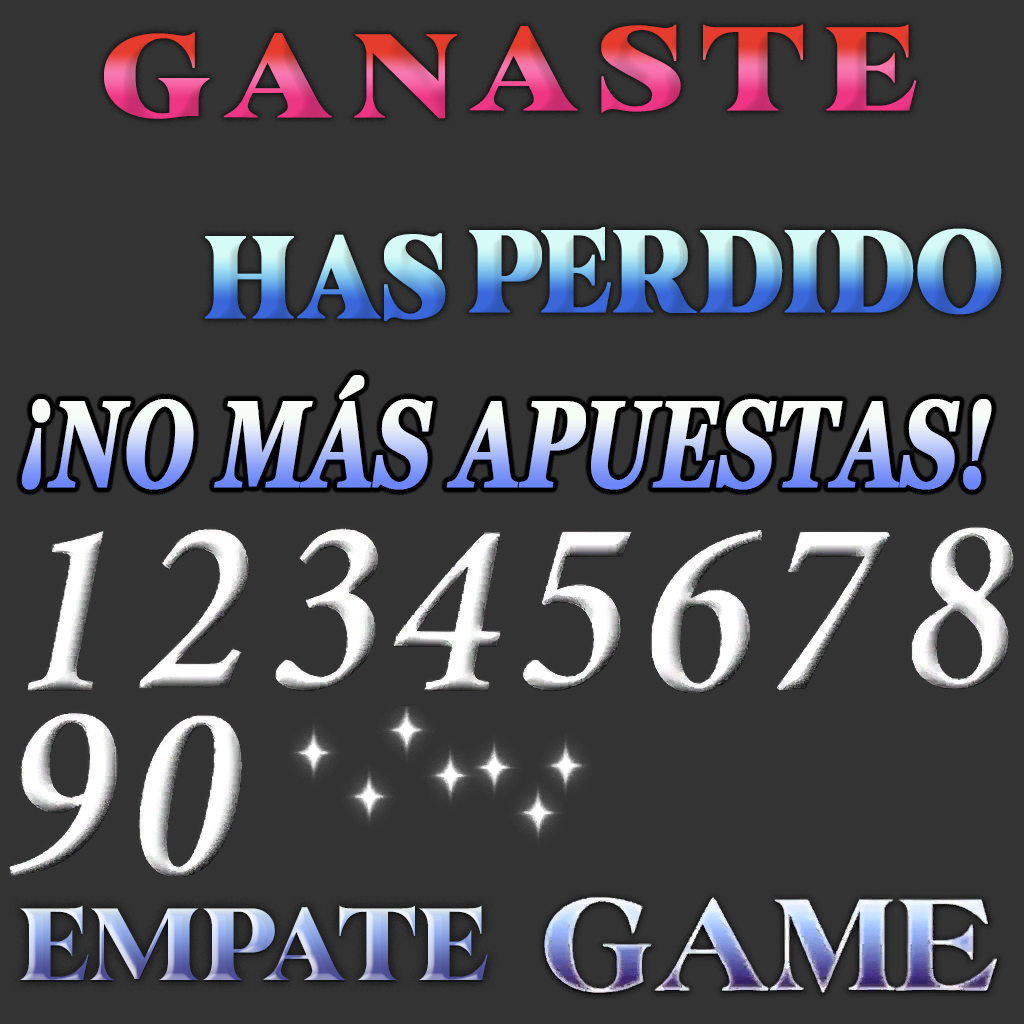
<style>
.page{position:relative;width:1024px;height:1024px;background:#333333}
.page>*{position:absolute;margin:0}
.t1{font:117.3px "KarlieSerif-Regular";letter-spacing:0.12em;font-weight:bold;scale:1.06 1}
.t2{font:115.5px "KarlieSerif-Regular";font-weight:bold;scale:0.81 1}
.t3{font:121.7px "Georgia-BoldItalic";font-weight:bold;scale:0.69 1}
.t4{font:102.1px "KarlieSerif-Regular";scale:0.93 1}
</style>
<div class="page">
<p class="t1" style="left:469px;top:24px;width:448px;height:89px">aste</p>
<p class="t1" style="left:104px;top:32px;width:354px;height:87px">GAn</p>
<p class="t2" style="left:205px;top:233px;width:241px;height:88px">has</p>
<p class="t2" style="left:469px;top:227px;width:533px;height:88px">perdido</p>
<p class="t3" style="left:21px;top:375px;width:971px;height:115px">¡NO MÁS APUESTAS!</p>
<p class="t4" style="left:20px;top:905px;width:468px;height:75px">EMPATE</p>
</div>
